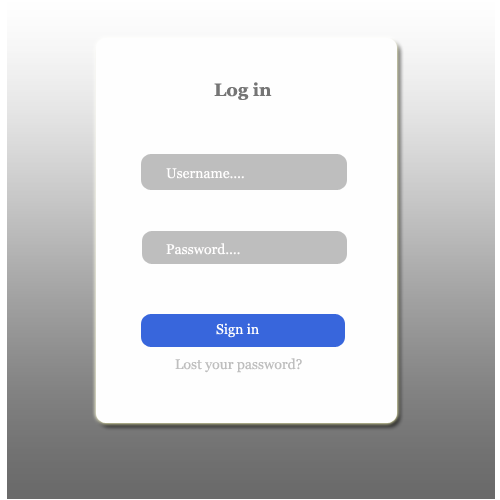
<style>
.page{position:relative;width:500px;height:500px;background:#fefefe}
.page>*{position:absolute;margin:0}
.t1{font:18px "Georgia-Bold";color:#757575}
.t2{font:14px "Georgia";color:#fffefe}
.t3{font:14px "Georgia";color:#bebebe}
</style>
<div class="page">
<p class="t1" style="left:214px;top:82px;width:58px;height:18px">Log in</p>
<p class="t2" style="left:166px;top:168px;width:78px;height:11px">Username....</p>
<p class="t2" style="left:166px;top:243px;width:74px;height:12px">Password....</p>
<p class="t2" style="left:216px;top:323px;width:43px;height:15px">Sign in</p>
<p class="t3" style="left:175px;top:358px;width:127px;height:15px">Lost your password?</p>
</div>
